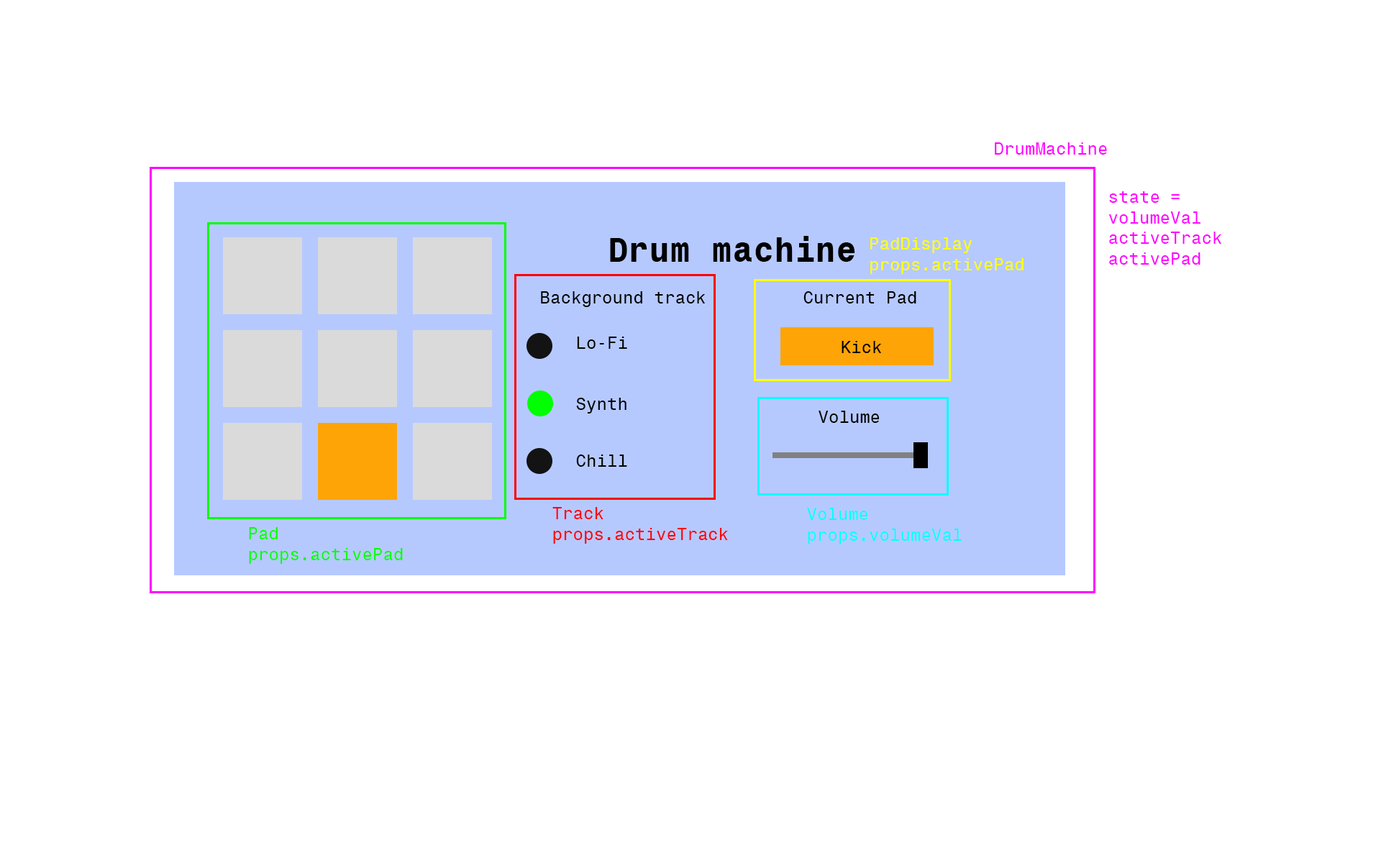
<style>
.page{position:relative;width:1381px;height:863px;background:#ffffff}
.page>*{position:absolute;margin:0}
.t1{font:17.3px "Monospace821BT-Roman";color:#ff00ff}
.t2{font:34.5px "Monospace821BT-Bold";color:#000000}
.t3{font:17.3px "Monospace821BT-Roman";color:#ffff00}
.t4{font:17.3px "Monospace821BT-Roman";color:#000000}
.t5{font:17.3px "Monospace821BT-Roman";color:#ff0000}
.t6{font:17.3px "Monospace821BT-Roman";color:#00ffff}
.t7{font:17.3px "Monospace821BT-Roman";color:#00ff00}
</style>
<div class="page">
<p class="t1" style="left:995px;top:142px;width:112px;height:13px">DrumMachine</p>
<p class="t1" style="left:1109px;top:191px;width:113px;height:74px">state =<br>volumeVal<br>activeTrack<br>activePad</p>
<p class="t2" style="left:610px;top:236px;width:245px;height:26px">Drum machine</p>
<p class="t3" style="left:870px;top:237px;width:154px;height:37px">PadDisplay<br>props.activePad</p>
<p class="t4" style="left:541px;top:291px;width:165px;height:16px">Background track</p>
<p class="t4" style="left:804px;top:291px;width:113px;height:13px">Current Pad</p>
<p class="t4" style="left:577px;top:337px;width:50px;height:12px">Lo-Fi</p>
<p class="t4" style="left:842px;top:341px;width:40px;height:12px">Kick</p>
<p class="t4" style="left:576px;top:398px;width:51px;height:16px">Synth</p>
<p class="t4" style="left:819px;top:411px;width:61px;height:12px">Volume</p>
<p class="t4" style="left:576px;top:455px;width:51px;height:12px">Chill</p>
<p class="t5" style="left:553px;top:507px;width:175px;height:37px">Track<br>props.activeTrack</p>
<p class="t6" style="left:807px;top:508px;width:155px;height:37px">Volume<br>props.volumeVal</p>
<p class="t7" style="left:249px;top:527px;width:154px;height:37px">Pad<br>props.activePad</p>
</div>
